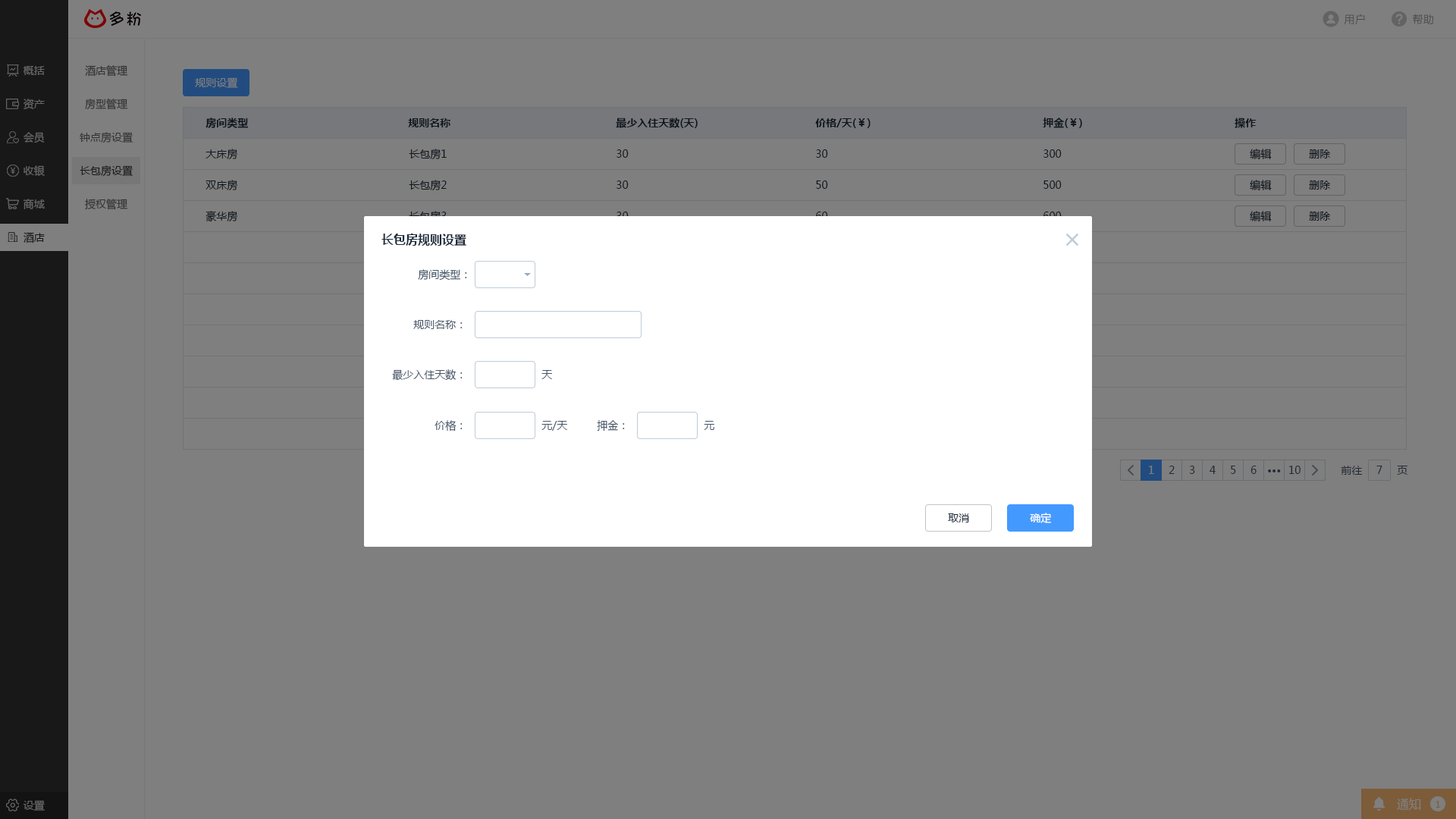
<style>
.page{position:relative;width:1456px;height:819px;background:#7f7f7f}
.page>*{position:absolute;margin:0}
.t1{font:10.6px "MicrosoftYaHei";letter-spacing:0.025em;color:#4c4c4c}
.t2{font:10.6px "MicrosoftYaHei";color:#666666}
.t3{font:10.6px "MicrosoftYaHei";color:#333333}
.t4{font:10.6px "MicrosoftYaHei";color:#7f7f7f}
.t5{font:10.6px "MicrosoftYaHei-Bold";color:#0f161e}
.t6{font:10.6px "MicrosoftYaHei";color:#0f161e}
.t7{font:10.6px "MicrosoftYaHei";color:#191919}
.t8{font:10.6px "MicrosoftYaHei";color:#181818}
.t9{font:12.1px "MicrosoftYaHei-Bold";color:#1f2d3d}
.t10{font:10.6px "MicrosoftYaHei";color:#48576a}
.t11{font:10.6px "MicrosoftYaHei";color:#242b35}
.t12{font:10.6px "MicrosoftYaHei-Bold";color:#242b35}
.t13{font:10.6px "MicrosoftYaHei";color:#1f2d3d}
.t14{font:10.6px "MicrosoftYaHei";color:#ffffff}
.t15{font:12.1px "MicrosoftYaHei";color:#7f7f7f}
.t16{font:9.1px "MicrosoftYaHei";color:#7d5c3a}
</style>
<div class="page">
<p class="t1" style="left:1344px;top:14px;width:21px;height:11px">用户</p>
<p class="t1" style="left:1413px;top:14px;width:20px;height:11px">帮助</p>
<p class="t2" style="left:23px;top:66px;width:22px;height:9px">概括</p>
<p class="t3" style="left:85px;top:65px;width:42px;height:12px">酒店管理</p>
<p class="t4" style="left:195px;top:77px;width:43px;height:11px">规则设置</p>
<p class="t2" style="left:24px;top:99px;width:21px;height:10px">资产</p>
<p class="t3" style="left:85px;top:99px;width:42px;height:11px">房型管理</p>
<p class="t5" style="left:206px;top:118px;width:42px;height:10px">房间类型</p>
<p class="t5" style="left:408px;top:118px;width:42px;height:9px">规则名称</p>
<p class="t5" style="left:616px;top:118px;width:82px;height:10px">最少入住天数(天)</p>
<p class="t5" style="left:815px;top:118px;width:56px;height:10px">价格/天(￥)</p>
<p class="t5" style="left:1043px;top:118px;width:39px;height:10px">押金(￥)</p>
<p class="t5" style="left:1235px;top:118px;width:21px;height:10px">操作</p>
<p class="t2" style="left:24px;top:132px;width:21px;height:11px">会员</p>
<p class="t3" style="left:80px;top:132px;width:53px;height:11px">钟点房设置</p>
<p class="t6" style="left:206px;top:149px;width:32px;height:11px">大床房</p>
<p class="t6" style="left:409px;top:149px;width:38px;height:11px">长包房1</p>
<p class="t6" style="left:617px;top:149px;width:12px;height:9px">30</p>
<p class="t6" style="left:816px;top:149px;width:12px;height:9px">30</p>
<p class="t6" style="left:1043px;top:149px;width:19px;height:9px">300</p>
<p class="t6" style="left:1250px;top:149px;width:22px;height:10px">编辑</p>
<p class="t6" style="left:1309px;top:149px;width:22px;height:9px">删除</p>
<p class="t2" style="left:24px;top:165px;width:21px;height:11px">收银</p>
<p class="t7" style="left:80px;top:165px;width:53px;height:12px">长包房设置</p>
<p class="t6" style="left:206px;top:180px;width:32px;height:11px">双床房</p>
<p class="t6" style="left:409px;top:180px;width:38px;height:11px">长包房2</p>
<p class="t6" style="left:617px;top:180px;width:12px;height:9px">30</p>
<p class="t6" style="left:816px;top:180px;width:12px;height:9px">50</p>
<p class="t6" style="left:1043px;top:180px;width:19px;height:9px">500</p>
<p class="t6" style="left:1250px;top:180px;width:22px;height:10px">编辑</p>
<p class="t6" style="left:1309px;top:180px;width:22px;height:10px">删除</p>
<p class="t2" style="left:23px;top:199px;width:22px;height:10px">商城</p>
<p class="t3" style="left:85px;top:199px;width:42px;height:11px">授权管理</p>
<p class="t6" style="left:206px;top:211px;width:32px;height:11px">豪华房</p>
<p class="t6" style="left:1250px;top:211px;width:22px;height:10px">编辑</p>
<p class="t6" style="left:1309px;top:212px;width:22px;height:9px">删除</p>
<p class="t8" style="left:24px;top:232px;width:21px;height:11px">酒店</p>
<p class="t9" style="left:381px;top:234px;width:85px;height:12px">长包房规则设置</p>
<p class="t10" style="left:418px;top:269px;width:49px;height:12px">房间类型：</p>
<p class="t10" style="left:413px;top:320px;width:50px;height:9px">规则名称：</p>
<p class="t10" style="left:392px;top:369px;width:71px;height:12px">最少入住天数：</p>
<p class="t10" style="left:541px;top:370px;width:12px;height:9px">天</p>
<p class="t10" style="left:435px;top:420px;width:28px;height:11px">价格：</p>
<p class="t10" style="left:541px;top:421px;width:27px;height:10px">元/天</p>
<p class="t10" style="left:597px;top:420px;width:28px;height:11px">押金：</p>
<p class="t10" style="left:704px;top:421px;width:10px;height:9px">元</p>
<p class="t4" style="left:1149px;top:466px;width:5px;height:8px">1</p>
<p class="t11" style="left:1169px;top:466px;width:6px;height:8px">2</p>
<p class="t11" style="left:1189px;top:466px;width:6px;height:8px">3</p>
<p class="t11" style="left:1210px;top:466px;width:6px;height:8px">4</p>
<p class="t11" style="left:1231px;top:466px;width:5px;height:8px">5</p>
<p class="t11" style="left:1250px;top:466px;width:7px;height:8px">6</p>
<p class="t12" style="left:1268px;top:469px;width:13px;height:3px">···</p>
<p class="t11" style="left:1289px;top:466px;width:12px;height:8px">10</p>
<p class="t11" style="left:1341px;top:466px;width:22px;height:9px">前往</p>
<p class="t11" style="left:1376px;top:466px;width:6px;height:8px">7</p>
<p class="t11" style="left:1397px;top:466px;width:10px;height:9px">页</p>
<p class="t13" style="left:948px;top:513px;width:21px;height:9px">取消</p>
<p class="t14" style="left:1030px;top:513px;width:21px;height:10px">确定</p>
<p class="t15" style="left:1397px;top:798px;width:24px;height:12px">通知</p>
<p class="t2" style="left:23px;top:800px;width:22px;height:11px">设置</p>
<p class="t16" style="left:1436px;top:801px;width:5px;height:7px">1</p>
</div>
